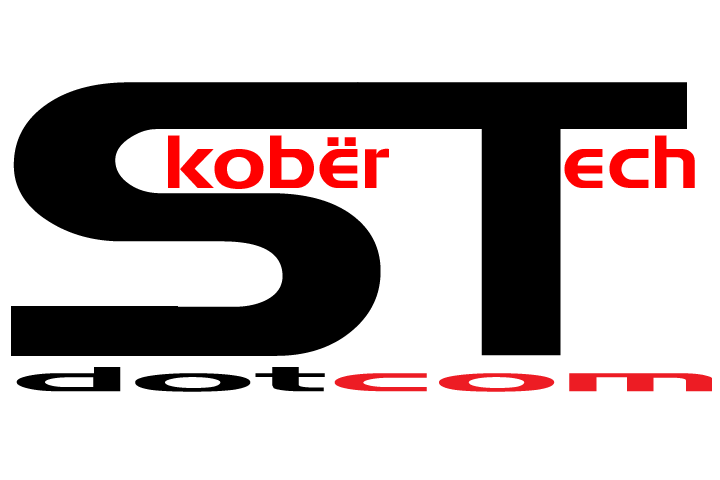
<style>
.page{position:relative;width:720px;height:480px;background:#ffffff}
.page>*{position:absolute;margin:0}
.t1{font:390.6px "Denmark";color:#000000;scale:1.24 1}
.t2{font:75px "Denmark";color:#ff0000;scale:1.09 1}
.t3{font:34.2px "Denmark";color:#000000;scale:5.6 1}
.t4{font:34.2px "Denmark";color:#ed1c24;scale:5.6 1}
</style>
<div class="page">
<p class="t1" style="left:13px;top:82px;width:368px;height:274px">S</p>
<p class="t1" style="left:357px;top:82px;width:330px;height:274px">T</p>
<p class="t2" style="left:168px;top:135px;width:221px;height:54px">kobër</p>
<p class="t2" style="left:564px;top:135px;width:131px;height:53px">ech</p>
<p class="t3" style="left:16px;top:367px;width:696px;height:25px">dot<span class="t4">com</span></p>
</div>
